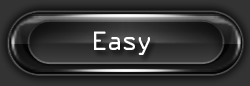
<style>
.page{position:relative;width:250px;height:86px}
.page>*{position:absolute;margin:0}
.t1{font:23.9px "OCRAStd";letter-spacing:-0.1em;color:#ffffff}
</style>
<div class="page">
<p class="t1" style="left:94px;top:31px;width:56px;height:24px">Easy</p>
</div>
